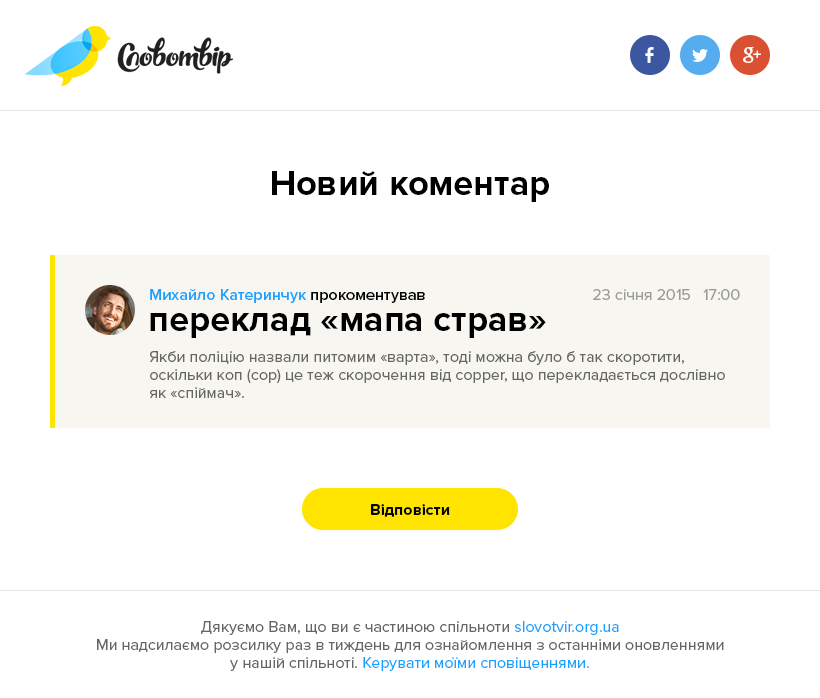
<style>
.page{position:relative;width:820px;height:698px;background:#ffffff}
.page>*{position:absolute;margin:0}
.t1{font:36px "ProximaNova-Bold";color:#000000}
.t2{font:16px "ProximaNova-Semibold";color:#17a2ff}
.t3{font:16px "ProximaNova-Semibold";color:#000000}
.t4{font:16px "ProximaNova-Regular";color:#999999}
.t5{font:16px/18px "ProximaNova-Regular";color:#666666}
.t6{font:16px "ProximaNova-Bold";color:#000000}
.t7{font:16px/18px "ProximaNova-Regular";color:#17a2ff}
</style>
<div class="page">
<p class="t1" style="left:272px;top:171px;width:277px;height:31px">Новий коментар</p>
<p class="t2" style="left:150px;top:289px;width:275px;height:14px">Михайло Катеринчук <span class="t3">прокоментував</span></p>
<p class="t4" style="left:593px;top:289px;width:147px;height:11px">23 січня 2015   17:00</p>
<p class="t1" style="left:150px;top:313px;width:396px;height:25px">переклад «мапа страв»</p>
<p class="t5" style="left:150px;top:351px;width:575px;height:47px">Якби поліцію назвали питомим «варта», тоді можна було б так скоротити, оскільки коп (cop) це теж скорочення від copper, що перекладається дослівно як «спіймач».</p>
<p class="t6" style="left:371px;top:504px;width:79px;height:13px">Відповісти</p>
<p class="t5" style="left:97px;top:621px;width:627px;height:50px;text-align:center">Дякуємо Вам, що ви є частиною спільноти <span class="t7">slovotvir.org.ua</span><br>Ми надсилаємо розсилку раз в тиждень для ознайомлення з останніми оновленнями<br>у нашій спільноті. <span class="t7">Керувати моїми сповіщеннями.</span></p>
</div>
